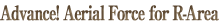
<style>
.page{position:relative;width:220px;height:26px;background:#ffffff}
.page>*{position:absolute;margin:0}
.t1{font:20px "RyuminPro-ExBold";letter-spacing:-0.08em;color:#6b573f;font-weight:bold;scale:0.75 1}
</style>
<div class="page">
<p class="t1" style="left:0px;top:5px;width:219px;height:16px">Advance! Aerial Force for R-Area</p>
</div>
